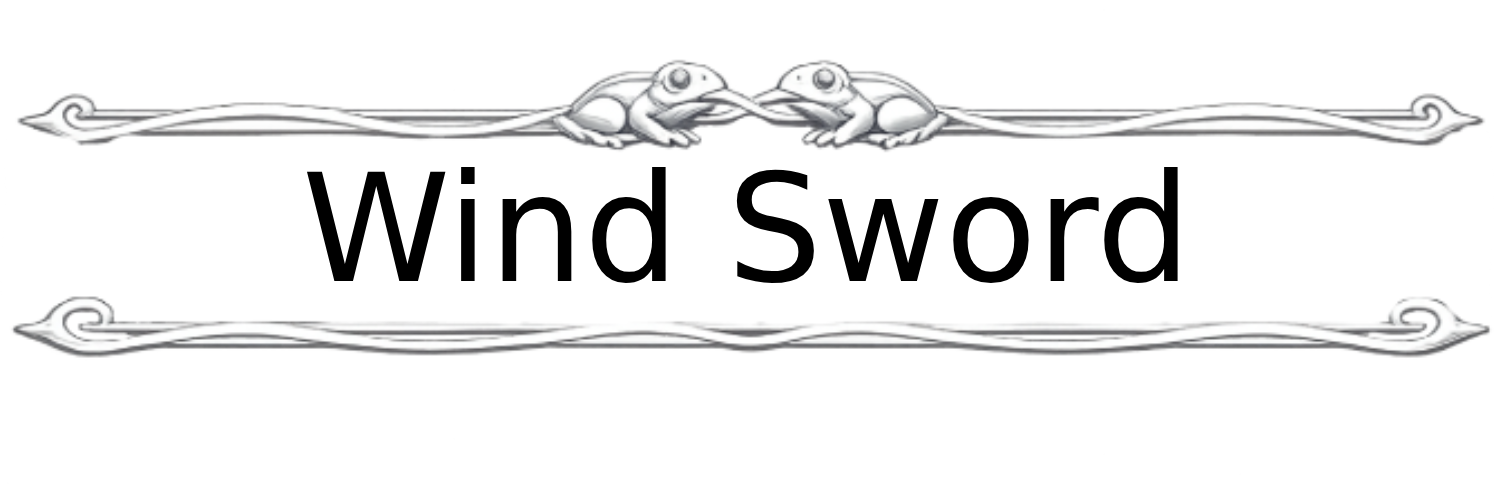
<style>
.page{position:relative;width:1500px;height:500px;background:#ffffff}
.page>*{position:absolute;margin:0}
.t1{font:150px "DejaVuSans";color:#000000}
</style>
<div class="page">
<p class="t1" style="left:306px;top:167px;width:872px;height:117px">Wind Sword</p>
</div>
